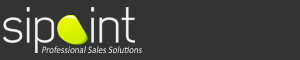
<style>
.page{position:relative;width:300px;height:60px;background:#333333}
.page>*{position:absolute;margin:0}
.t1{font:10px "Calibri";font-style:italic;scale:0.9 1}
</style>
<div class="page">
<p class="t1" style="left:42px;top:46px;width:100px;height:7px">Professional Sales Solutions</p>
</div>
